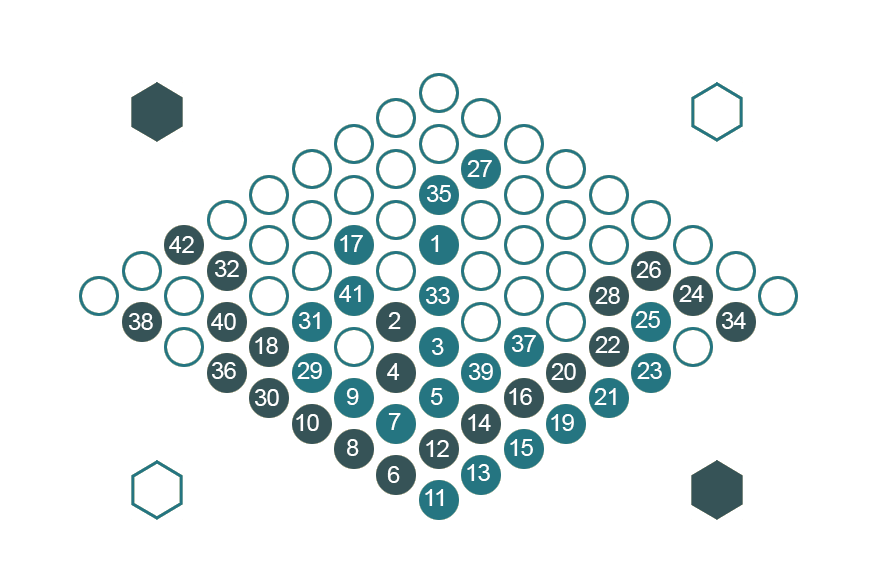
<style>
.page{position:relative;width:880px;height:588px;background:#ffffff}
.page>*{position:absolute;margin:0}
.t1{font:24px "ArialMT";letter-spacing:-0.025em;color:#ffffff}
</style>
<div class="page">
<p class="t1" style="left:467px;top:160px;width:25px;height:17px">27</p>
<p class="t1" style="left:427px;top:185px;width:24px;height:17px">35</p>
<p class="t1" style="left:169px;top:236px;width:25px;height:17px">42</p>
<p class="t1" style="left:340px;top:235px;width:23px;height:17px">17</p>
<p class="t1" style="left:431px;top:235px;width:8px;height:17px">1</p>
<p class="t1" style="left:215px;top:260px;width:24px;height:17px">32</p>
<p class="t1" style="left:636px;top:261px;width:25px;height:17px">26</p>
<p class="t1" style="left:339px;top:285px;width:22px;height:17px">41</p>
<p class="t1" style="left:426px;top:287px;width:24px;height:17px">33</p>
<p class="t1" style="left:595px;top:287px;width:25px;height:17px">28</p>
<p class="t1" style="left:679px;top:285px;width:25px;height:17px">24</p>
<p class="t1" style="left:129px;top:313px;width:24px;height:17px">38</p>
<p class="t1" style="left:211px;top:313px;width:25px;height:17px">40</p>
<p class="t1" style="left:299px;top:312px;width:21px;height:17px">31</p>
<p class="t1" style="left:388px;top:312px;width:13px;height:17px">2</p>
<p class="t1" style="left:635px;top:311px;width:25px;height:17px">25</p>
<p class="t1" style="left:722px;top:312px;width:24px;height:17px">34</p>
<p class="t1" style="left:255px;top:337px;width:23px;height:17px">18</p>
<p class="t1" style="left:432px;top:338px;width:12px;height:17px">3</p>
<p class="t1" style="left:512px;top:335px;width:24px;height:17px">37</p>
<p class="t1" style="left:595px;top:336px;width:25px;height:17px">22</p>
<p class="t1" style="left:212px;top:362px;width:24px;height:17px">36</p>
<p class="t1" style="left:297px;top:362px;width:25px;height:17px">29</p>
<p class="t1" style="left:387px;top:363px;width:13px;height:17px">4</p>
<p class="t1" style="left:469px;top:363px;width:24px;height:17px">39</p>
<p class="t1" style="left:551px;top:363px;width:25px;height:17px">20</p>
<p class="t1" style="left:637px;top:362px;width:25px;height:17px">23</p>
<p class="t1" style="left:255px;top:389px;width:24px;height:17px">30</p>
<p class="t1" style="left:346px;top:388px;width:13px;height:17px">9</p>
<p class="t1" style="left:431px;top:388px;width:12px;height:17px">5</p>
<p class="t1" style="left:509px;top:388px;width:23px;height:17px">16</p>
<p class="t1" style="left:594px;top:388px;width:22px;height:17px">21</p>
<p class="t1" style="left:296px;top:414px;width:23px;height:17px">10</p>
<p class="t1" style="left:388px;top:413px;width:13px;height:17px">7</p>
<p class="t1" style="left:468px;top:414px;width:23px;height:17px">14</p>
<p class="t1" style="left:551px;top:414px;width:23px;height:17px">19</p>
<p class="t1" style="left:347px;top:439px;width:12px;height:17px">8</p>
<p class="t1" style="left:426px;top:440px;width:23px;height:17px">12</p>
<p class="t1" style="left:510px;top:439px;width:23px;height:17px">15</p>
<p class="t1" style="left:387px;top:466px;width:13px;height:17px">6</p>
<p class="t1" style="left:467px;top:464px;width:23px;height:17px">13</p>
<p class="t1" style="left:425px;top:489px;width:19px;height:17px">11</p>
</div>
